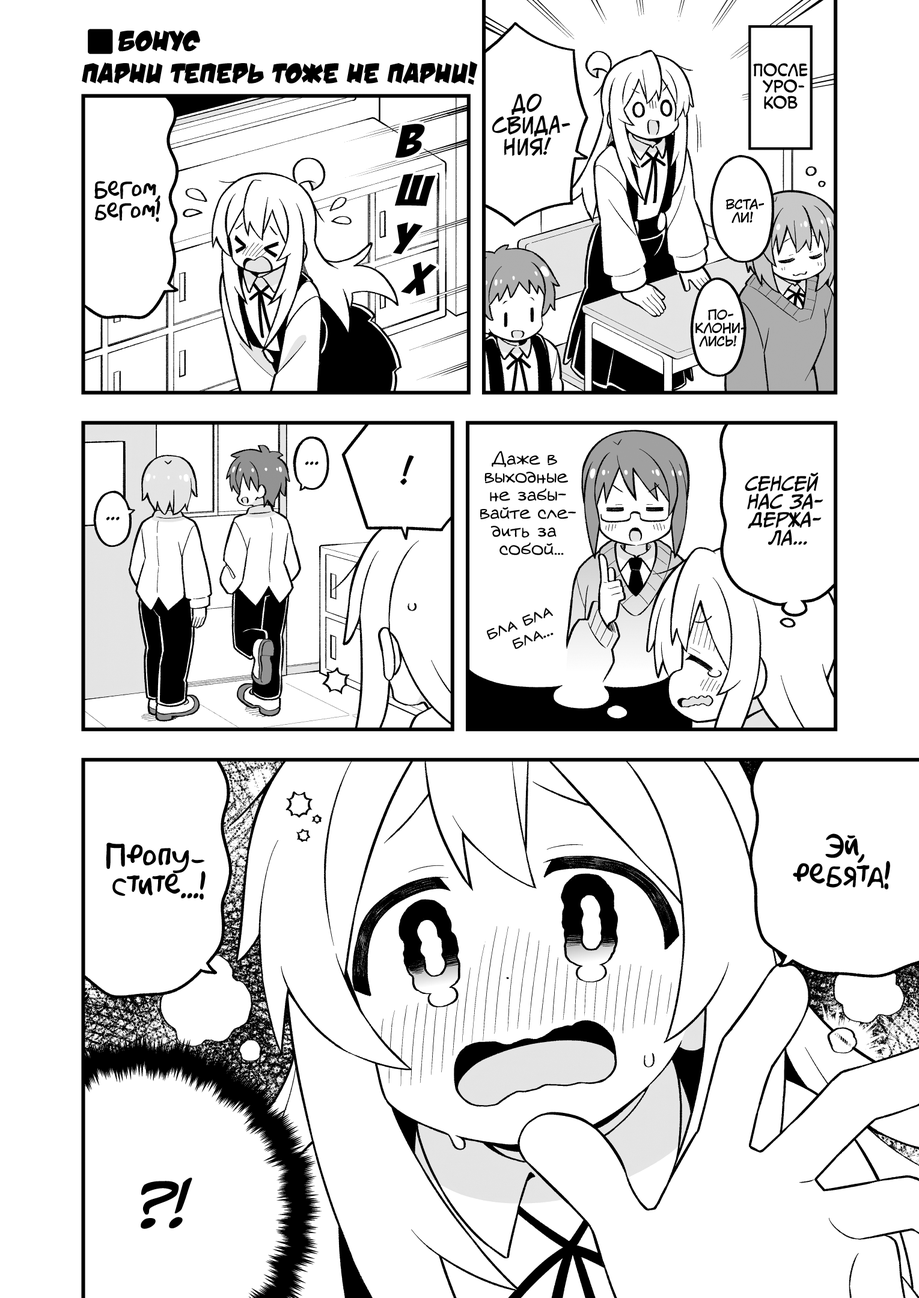
<style>
.page{position:relative;width:919px;height:1298px;background:#ffffff}
.page>*{position:absolute;margin:0}
.t1{font:28.8px "v_DamnNoisyKids";color:#000000;text-transform:uppercase}
.t2{font:28.2px "v_DamnNoisyKids";color:#000000;text-transform:uppercase}
.t3{font:16.2px "v_CCMonologous";color:#000000;text-transform:uppercase}
.t4{font:21.6px "v_CCJeffCampbell";color:#000000;text-transform:uppercase}
.t5{font:50.5px "BadaBoom";color:#000000;scale:1.2 1}
.t6{font:48.1px "BadaBoom";color:#000000;scale:1.2 1}
.t7{font:21.6px "AkbarPlain";color:#000000}
.t8{font:13.2px "KuraiVoice2";color:#000000;text-transform:uppercase}
.t9{font:49.3px "BadaBoom";color:#000000;scale:1.2 1}
.t10{font:18px "KuraiVoice2";color:#000000;text-transform:uppercase}
.t11{font:36.1px "v_CCJeffCampbell";color:#000000;text-transform:uppercase}
.t12{font:18px "v_Augie";color:#000000}
.t13{font:18px "CCMeanwhile";color:#000000;text-transform:uppercase;font-style:italic}
.t14{font:18px "v_Augie";color:#000000;font-variant:small-caps;font-weight:bold}
.t15{font:28.8px "AkbarPlain";color:#000000}
.t16{font:54.1px "CCMeanwhile";color:#000000;text-transform:uppercase;font-style:italic}
</style>
<div class="page">
<p class="t1" style="left:118px;top:30px;width:82px;height:22px">Бонус</p>
<p class="t2" style="left:82px;top:61px;width:396px;height:24px">Парни теперь тоже не парни!</p>
<p class="t3" style="left:753px;top:63px;width:55px;height:46px;text-align:center">После<br>уро-<br>ков</p>
<p class="t4" style="left:492px;top:94px;width:78px;height:62px;text-align:center">До<br>свида-<br>ния!</p>
<p class="t5" style="left:395px;top:124px;width:30px;height:34px;rotate:2deg">в</p>
<p class="t6" style="left:395px;top:173px;width:41px;height:33px;rotate:4deg">ш</p>
<p class="t7" style="left:94px;top:181px;width:66px;height:41px;text-align:center">Бегом,<br>бегом!</p>
<p class="t8" style="left:725px;top:198px;width:39px;height:25px;text-align:center">Вста-<br>ли!</p>
<p class="t9" style="left:393px;top:222px;width:29px;height:32px;rotate:6deg">у</p>
<p class="t6" style="left:401px;top:261px;width:36px;height:35px;rotate:9deg">х</p>
<p class="t8" style="left:695px;top:309px;width:51px;height:38px;text-align:center">По-<br>клони-<br>лись!</p>
<p class="t10" style="left:305px;top:461px;width:13px;height:4px">...</p>
<p class="t11" style="left:400px;top:455px;width:14px;height:30px">!</p>
<p class="t12" style="left:480px;top:451px;width:96px;height:104px;text-align:center">Даже в<br>выходные<br>не забы-<br>вайте сле-<br>дить за<br>собой...</p>
<p class="t13" style="left:744px;top:472px;width:79px;height:74px;text-align:center">Сенсей<br>нас за-<br>держа-<br>ла...</p>
<p class="t10" style="left:106px;top:517px;width:14px;height:3px">...</p>
<p class="t14" style="left:487px;top:607px;width:66px;height:42px;text-align:center;rotate:-21deg">бла бла<br>бла...</p>
<p class="t15" style="left:793px;top:833px;width:97px;height:56px;text-align:center">Эй,<br>ребята!</p>
<p class="t15" style="left:106px;top:842px;width:100px;height:58px;text-align:center">Пропу-<br>стите...!</p>
<p class="t16" style="left:141px;top:1177px;width:51px;height:52px">?!</p>
</div>
